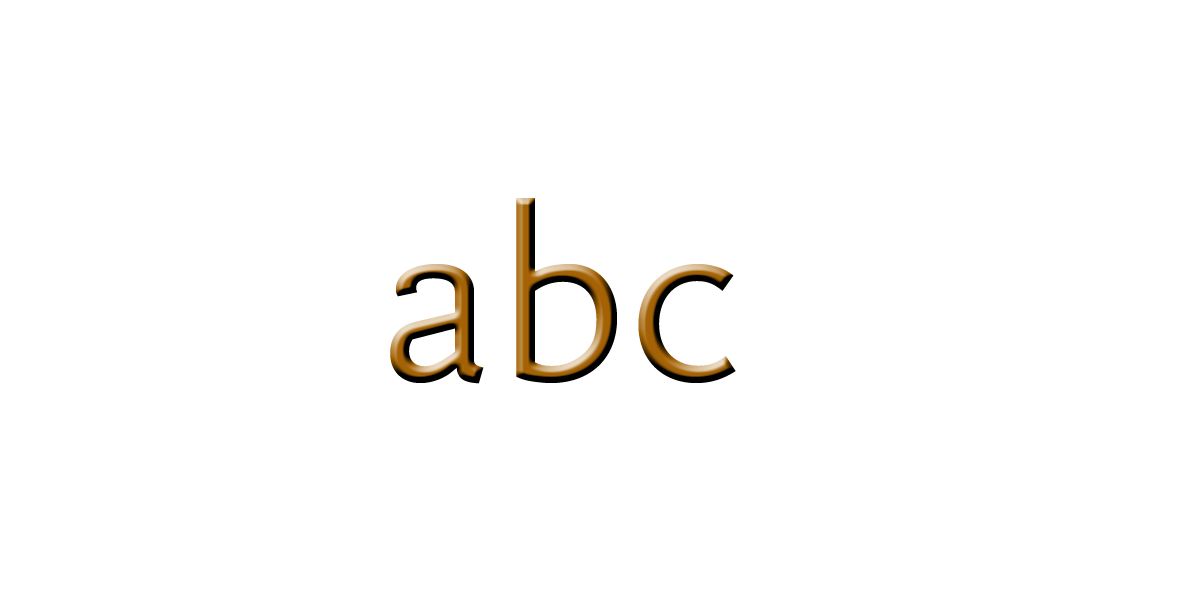
<style>
.page{position:relative;width:1200px;height:600px;background:#ffffff}
.page>*{position:absolute;margin:0}
.t1{font:250px "ScalaSansOT-Regular"}
</style>
<div class="page">
<p class="t1" style="left:390px;top:198px;width:346px;height:186px">abc</p>
</div>
